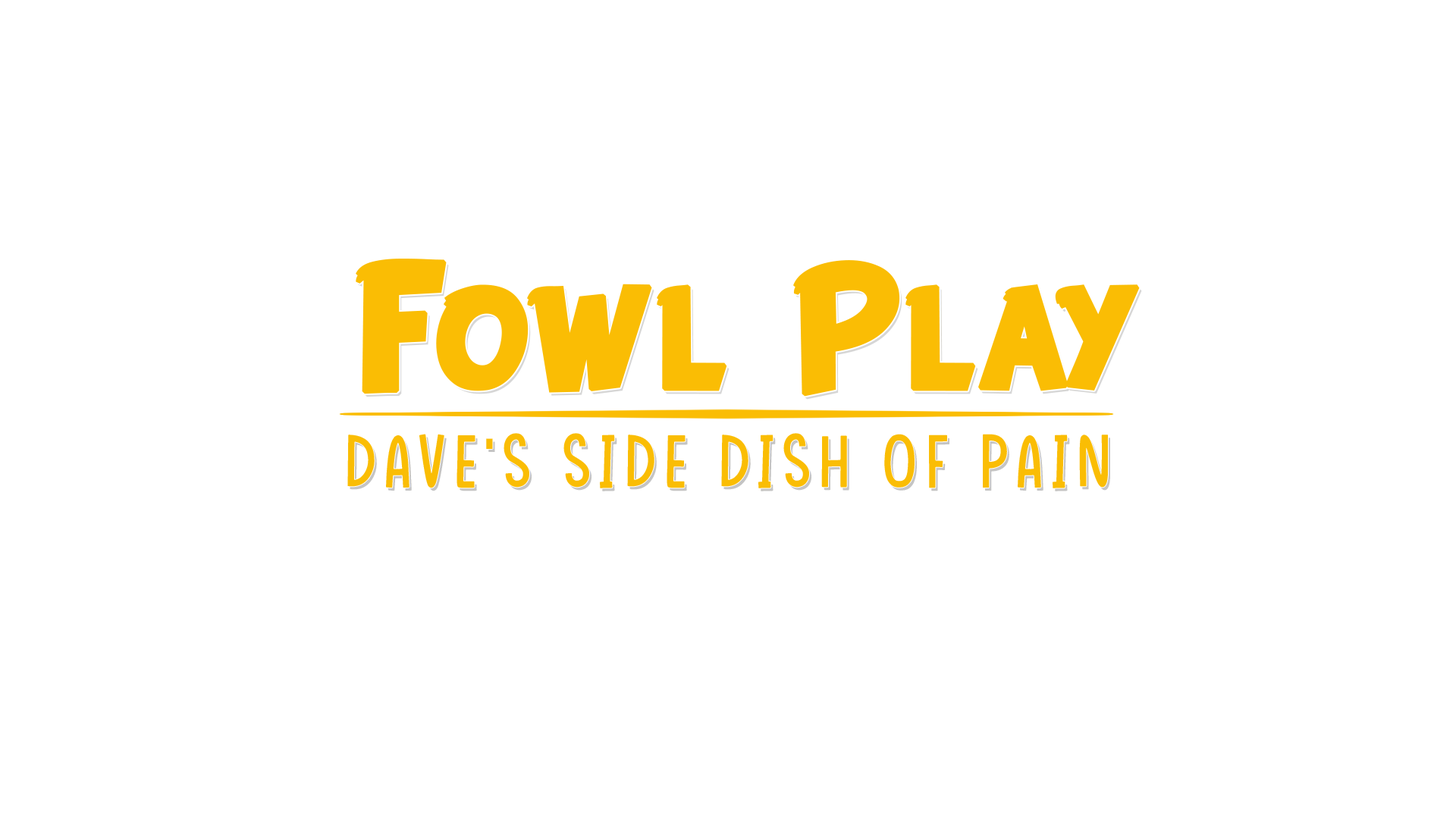
<style>
.page{position:relative;width:1456px;height:819px;background:#ffffff}
.page>*{position:absolute;margin:0}
.t1{font:174.4px "DUCKODEMO";color:#fabd04;font-weight:bold}
.t2{font:75.8px "AloneOnEarthRegular";letter-spacing:0.1em;color:#fabd04}
</style>
<div class="page">
<p class="t1" style="left:356px;top:259px;width:784px;height:138px">Fowl Play</p>
<p class="t2" style="left:347px;top:433px;width:761px;height:55px">Dave's Side Dish of Pain</p>
</div>
